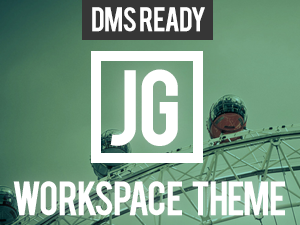
<style>
.page{position:relative;width:300px;height:225px}
.page>*{position:absolute;margin:0}
.t1{font:26.5px "Bebas";letter-spacing:-0.05em;color:#ffffff}
.t2{font:84px "Bebas";letter-spacing:-0.05em;color:#ffffff}
.t3{font:37.5px "Bebas";letter-spacing:-0.05em;color:#ffffff}
</style>
<div class="page">
<p class="t1" style="left:92px;top:7px;width:113px;height:25px">DMS   READY</p>
<p class="t2" style="left:110px;top:69px;width:68px;height:77px">JG</p>
<p class="t3" style="left:13px;top:181px;width:272px;height:35px">WORKSPACE      THEME</p>
</div>
